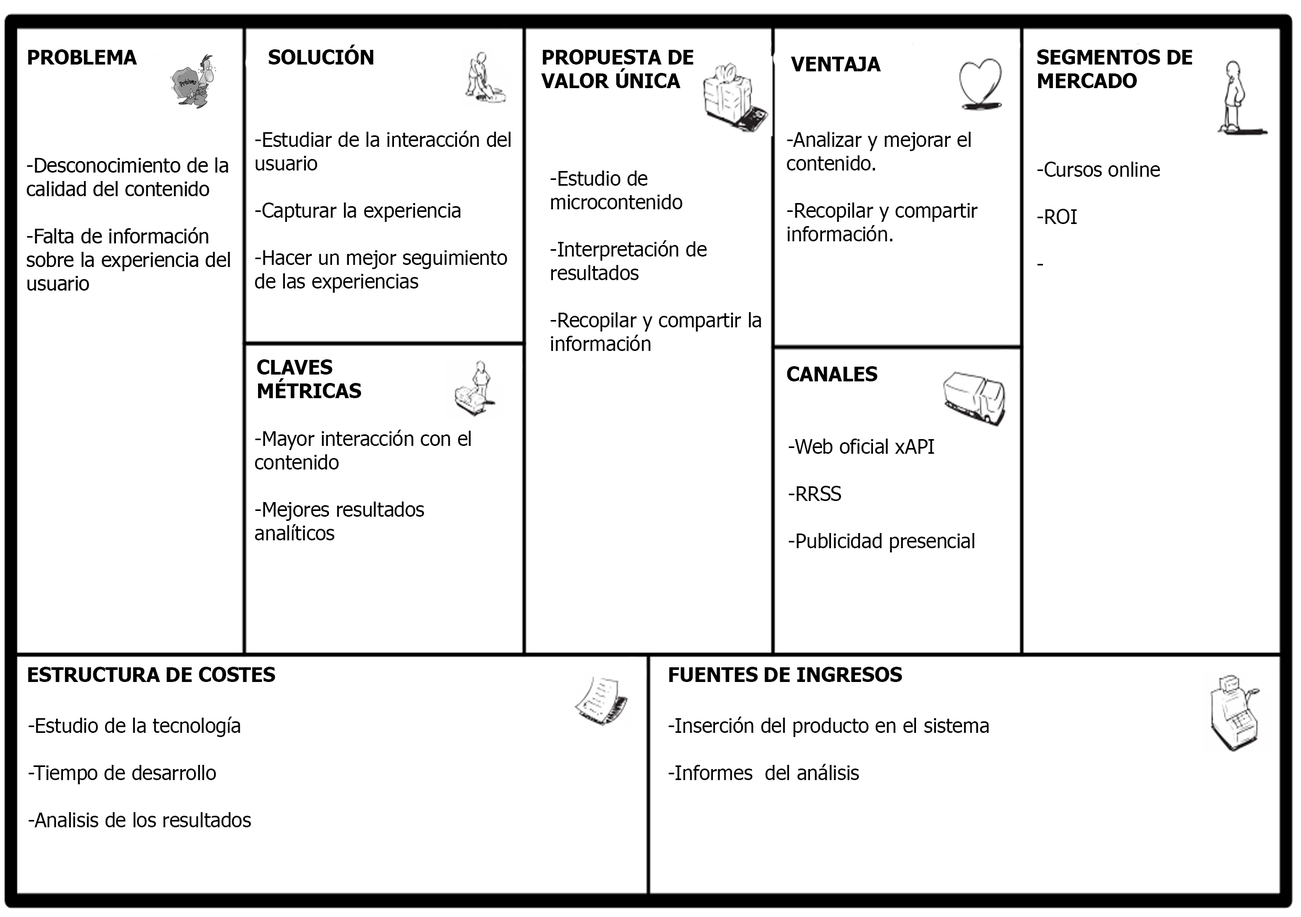
<style>
.page{position:relative;width:1301px;height:917px;background:#ffffff}
.page>*{position:absolute;margin:0}
.t1{font:19.7px "Tahoma-Bold";color:#000000}
.t2{font:19.7px "Tahoma";color:#000000}
</style>
<div class="page">
<p class="t1" style="left:28px;top:49px;width:109px;height:16px">PROBLEMA</p>
<p class="t1" style="left:269px;top:45px;width:104px;height:20px">SOLUCIÓN</p>
<p class="t1" style="left:541px;top:49px;width:152px;height:39px">PROPUESTA DE<br>VALOR ÚNICA</p>
<p class="t1" style="left:1037px;top:49px;width:155px;height:39px">SEGMENTOS DE MERCADO</p>
<p class="t1" style="left:790px;top:57px;width:91px;height:14px">VENTAJA</p>
<p class="t2" style="left:255px;top:131px;width:256px;height:162px">-Estudiar de la interacción del usuario<br><br>-Capturar la experiencia<br><br>-Hacer un mejor seguimiento de las experiencias</p>
<p class="t2" style="left:787px;top:132px;width:191px;height:109px">-Analizar y mejorar el contenido.<br><br>-Recopilar y compartir información.</p>
<p class="t2" style="left:1037px;top:162px;width:123px;height:103px">-Cursos online<br><br>-ROI<br><br>-</p>
<p class="t2" style="left:550px;top:170px;width:211px;height:181px">-Estudio de <br>microcontenido<br><br>-Interpretación de <br>resultados<br><br>-Recopilar y compartir la información</p>
<p class="t1" style="left:257px;top:359px;width:104px;height:39px">CLAVES <br>MÉTRICAS</p>
<p class="t1" style="left:787px;top:366px;width:90px;height:15px">CANALES</p>
<p class="t2" style="left:255px;top:430px;width:216px;height:110px">-Mayor interacción con el contenido<br><br>-Mejores resultados <br>analíticos</p>
<p class="t2" style="left:788px;top:438px;width:186px;height:114px">-Web oficial xAPI<br><br>-RRSS<br><br>-Publicidad presencial</p>
<p class="t1" style="left:28px;top:667px;width:247px;height:15px">ESTRUCTURA DE COSTES</p>
<p class="t1" style="left:669px;top:667px;width:233px;height:15px">FUENTES DE INGRESOS</p>
<p class="t2" style="left:28px;top:716px;width:223px;height:111px">-Estudio de la tecnología<br><br>-Tiempo de desarrollo<br><br>-Analisis de los resultados</p>
<p class="t2" style="left:668px;top:716px;width:321px;height:64px">-Inserción del producto en el sistema<br><br>-Informes  del análisis</p>
</div>
